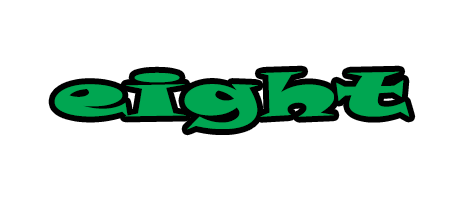
<style>
.page{position:relative;width:462px;height:199px;background:#ffffff}
.page>*{position:absolute;margin:0}
.t1{font:60px "SnapITC-Regular";color:#00a651;scale:2 1}
</style>
<div class="page">
<p class="t1" style="left:54px;top:71px;width:356px;height:59px">eight</p>
</div>
